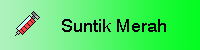
<style>
.page{position:relative;width:200px;height:50px}
.page>*{position:absolute;margin:0}
.t1{font:18px "Swiss721BT-Roman";color:#000000}
</style>
<div class="page">
<p class="t1" style="left:62px;top:19px;width:104px;height:13px">Suntik Merah</p>
</div>
